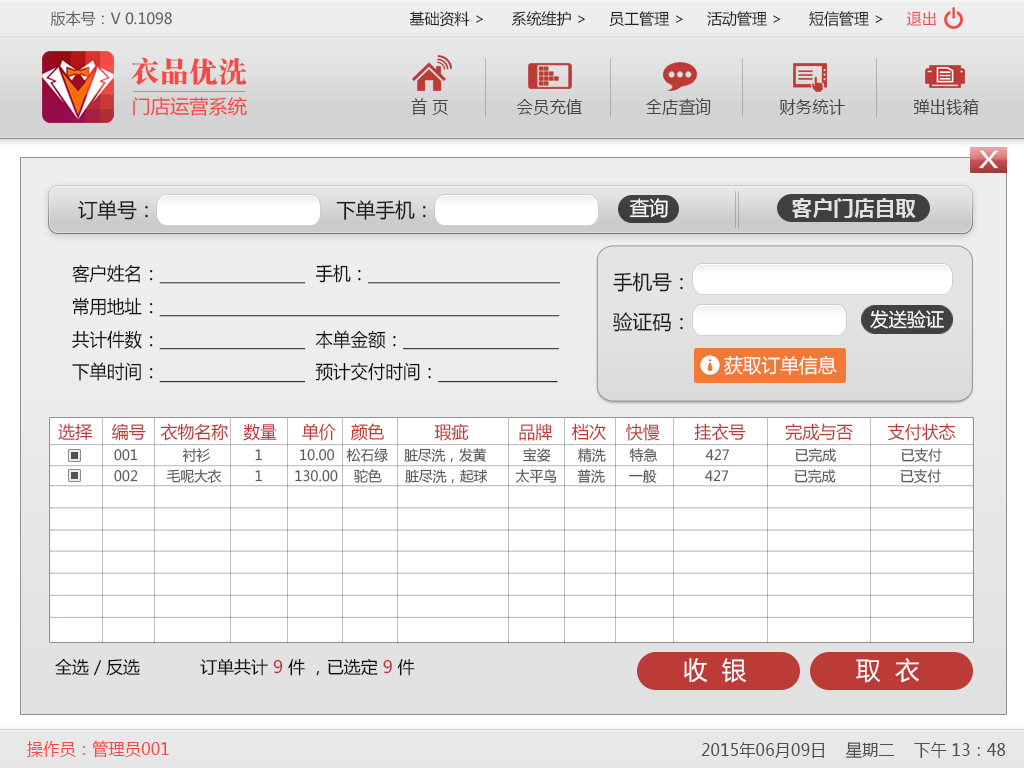
<style>
.page{position:relative;width:1024px;height:768px;background:#ffffff}
.page>*{position:absolute;margin:0}
.t1{font:15.3px "MicrosoftYaHei";color:#606060}
.t2{font:15.3px "MicrosoftYaHei";color:#242424}
.t3{font:15.3px "MicrosoftYaHei";color:#f44947}
.t4{font:29.6px "DFSong-XB-80-Win-GB";color:#f44947}
.t5{font:19.1px "MicrosoftYaHei";color:#f44947}
.t6{font:17px "MicrosoftYaHei";color:#474747;scale:0.97 1}
.t7{font:20px "MicrosoftYaHei";color:#ffffff}
.t8{font:20px "MicrosoftYaHei-Bold";letter-spacing:0.04em;color:#e2e2e2}
.t9{font:20px "MicrosoftYaHei";color:#191919}
.t10{font:18.3px/32.9px "MicrosoftYaHei";color:#121212;scale:0.96 1}
.t11{font:20px/40px "MicrosoftYaHei";color:#191919}
.t12{font:18.9px "MicrosoftYaHei";color:#fefefe}
.t13{font:17.2px "MicrosoftYaHei";color:#bc3b37}
.t14{font:14px "MicrosoftYaHei";color:#5b5b5b}
.t15{font:17.1px "MicrosoftYaHei";color:#0e0e0e}
.t16{font:17.1px "MicrosoftYaHei";color:#bc3b37}
.t17{font:25px "MicrosoftYaHei";color:#ffffff}
.t18{font:17.1px "MicrosoftYaHei";color:#f44947;scale:0.96 1}
.t19{font:17.1px "MicrosoftYaHei";color:#4f4f4f;scale:0.96 1}
</style>
<div class="page">
<p class="t1" style="left:50px;top:11px;width:122px;height:15px">版本号：V 0.1098</p>
<p class="t2" style="left:409px;top:11px;width:527px;height:16px">基础资料 &gt;      系统维护 &gt;     员工管理 &gt;     活动管理 &gt;      短信管理 &gt;     <span class="t3">退出</span></p>
<p class="t4" style="left:131px;top:57px;width:116px;height:28px">衣品优洗</p>
<p class="t5" style="left:133px;top:97px;width:114px;height:19px">门店运营系统</p>
<p class="t6" style="left:411px;top:98px;width:568px;height:17px">首 页              会员充值             全店查询              财务统计              弹出钱箱</p>
<p class="t7" style="left:629px;top:198px;width:39px;height:20px">查询</p>
<p class="t8" style="left:792px;top:198px;width:124px;height:20px">客户门店自取</p>
<p class="t9" style="left:78px;top:200px;width:348px;height:20px">订单号：                               下单手机：</p>
<p class="t10" style="left:72px;top:264px;width:489px;height:119px">客户姓名：                              手机：                                     <br>常用地址：                                                                             <br>共计件数：                              本单金额：                              <br>下单时间：                              预计交付时间：</p>
<p class="t11" style="left:613px;top:272px;width:70px;height:60px">手机号：<br>验证码：</p>
<p class="t12" style="left:870px;top:310px;width:74px;height:19px">发送验证</p>
<p class="t12" style="left:724px;top:356px;width:113px;height:19px">获取订单信息</p>
<p class="t13" style="left:58px;top:423px;width:898px;height:18px">选择    编号   衣物名称   数量     单价   颜色          瑕疵          品牌    档次    快慢       挂衣号        完成与否       支付状态</p>
<p class="t14" style="left:114px;top:448px;width:828px;height:15px">001           衬衫           1         10.00   松石绿    脏尽洗，发黄         宝姿      精洗      特急            427                已完成                已支付</p>
<p class="t14" style="left:114px;top:469px;width:827px;height:15px">002       毛呢大衣        1        130.00    驼色     脏尽洗，起球       太平鸟     普洗      一般            427                已完成                已支付</p>
<p class="t15" style="left:55px;top:658px;width:360px;height:18px">全选 / 反选            订单共计 <span class="t16">9 </span>件 ，已选定 <span class="t16">9</span> 件</p>
<p class="t17" style="left:684px;top:658px;width:63px;height:25px">收  银</p>
<p class="t17" style="left:856px;top:658px;width:63px;height:25px">取  衣</p>
<p class="t18" style="left:27px;top:740px;width:142px;height:18px">操作员：管理员001</p>
<p class="t19" style="left:701px;top:742px;width:305px;height:16px">2015年06月09日    星期二    下午 13：48</p>
</div>
